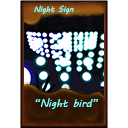
<style>
.page{position:relative;width:128px;height:128px;background:#ffffff}
.page>*{position:absolute;margin:0}
.t1{font:8px "MVBoli";color:#7fffff}
.t2{font:10.7px "MVBoli";color:#7fffff}
</style>
<div class="page">
<p class="t1" style="left:34px;top:5px;width:40px;height:9px">Night Sign</p>
<p class="t2" style="left:35px;top:98px;width:64px;height:11px">“Night bird”</p>
</div>
